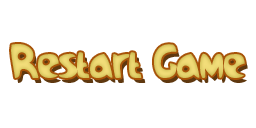
<style>
.page{position:relative;width:256px;height:128px;background:#ffffff}
.page>*{position:absolute;margin:0}
.t1{font:48.2px "Samba"}
</style>
<div class="page">
<p class="t1" style="left:14px;top:49px;width:234px;height:34px">Restart Game</p>
</div>
